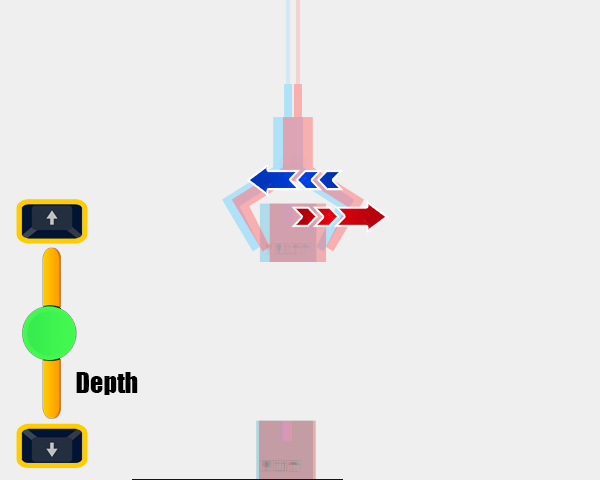
<style>
.page{position:relative;width:600px;height:480px;background:#efefef}
.page>*{position:absolute;margin:0}
.t1{font:26px "Impact";color:#000000}
</style>
<div class="page">
<p class="t1" style="left:76px;top:372px;width:62px;height:23px">Depth</p>
</div>
